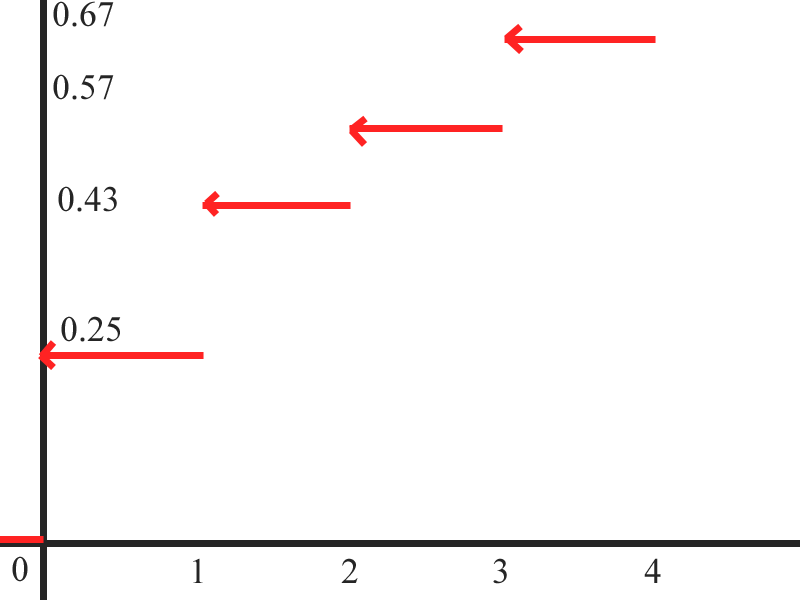
<style>
.page{position:relative;width:800px;height:600px;background:#ffffff}
.page>*{position:absolute;margin:0}
.t1{font:36px "TimesNewRomanPSMT";color:#252525}
</style>
<div class="page">
<p class="t1" style="left:53px;top:1px;width:61px;height:26px">0.67</p>
<p class="t1" style="left:53px;top:74px;width:61px;height:26px">0.57</p>
<p class="t1" style="left:58px;top:186px;width:59px;height:26px">0.43</p>
<p class="t1" style="left:61px;top:316px;width:60px;height:26px">0.25</p>
<p class="t1" style="left:193px;top:558px;width:10px;height:25px">1</p>
<p class="t1" style="left:341px;top:558px;width:17px;height:25px">2</p>
<p class="t1" style="left:493px;top:558px;width:14px;height:26px">3</p>
<p class="t1" style="left:644px;top:558px;width:17px;height:25px">4</p>
</div>
